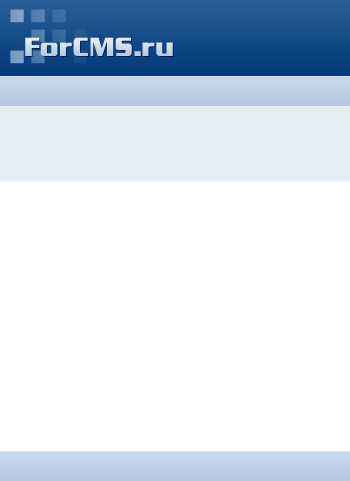
<style>
.page{position:relative;width:350px;height:481px;background:#ffffff}
.page>*{position:absolute;margin:0}
.t1{font:26px "EnterSansmanBold";color:#cedbea}
</style>
<div class="page">
<p class="t1" style="left:25px;top:37px;width:148px;height:19px">ForCMS.ru</p>
</div>
